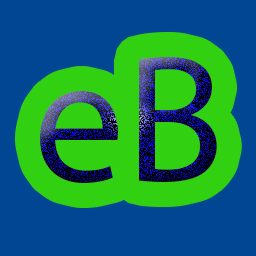
<style>
.page{position:relative;width:256px;height:256px;background:#014693}
.page>*{position:absolute;margin:0}
.t1{font:182.4px "MyriadPro-Regular"}
</style>
<div class="page">
<p class="t1" style="left:40px;top:57px;width:177px;height:127px">eB</p>
</div>
